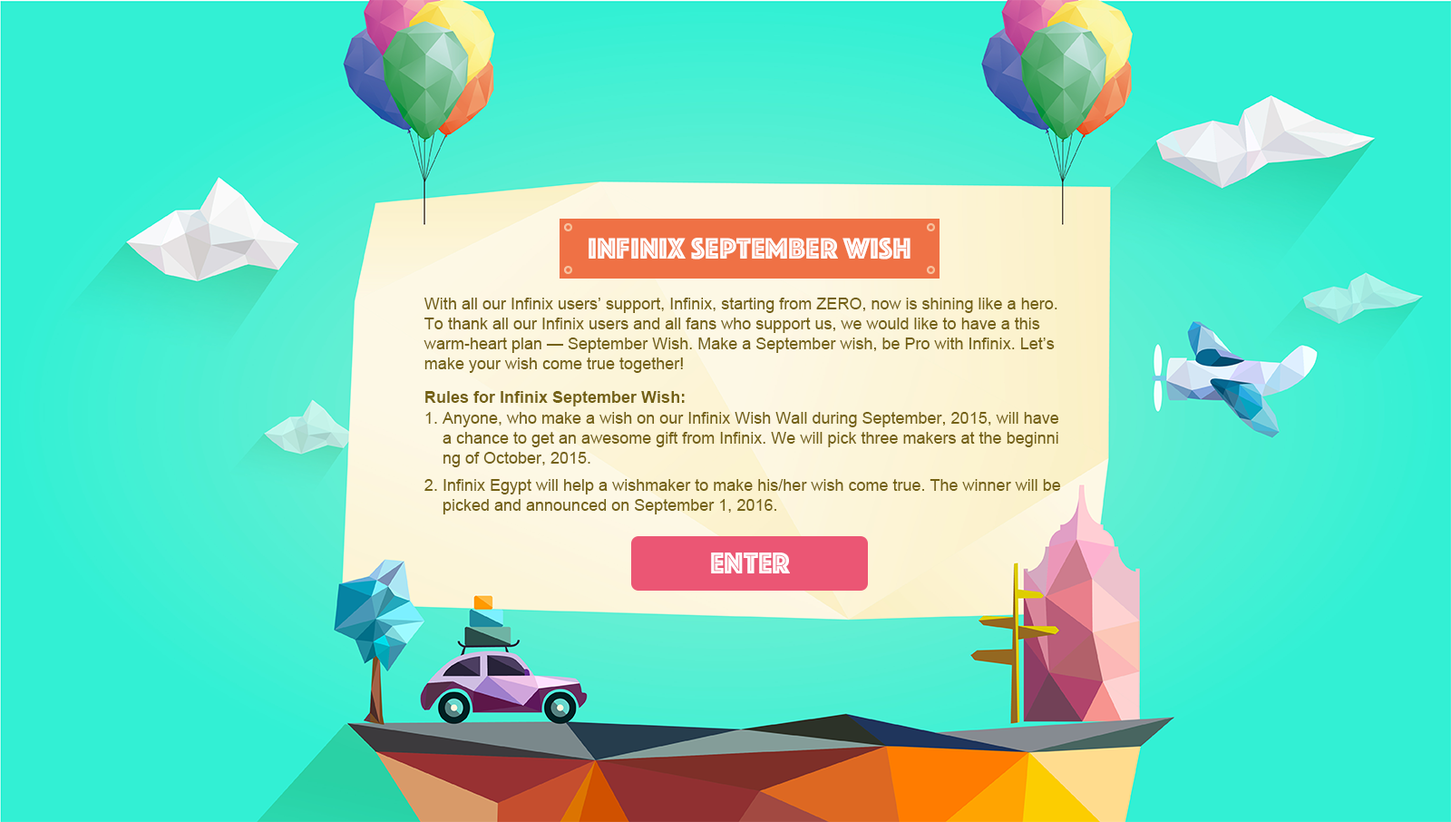
<style>
.page{position:relative;width:1451px;height:822px}
.page>*{position:absolute;margin:0}
.t1{font:30.5px "Phosphate-Inline";color:#ffffff}
.t2{font:16.3px/20px "ArialMT";color:#746113}
.t3{font:16.3px "Arial-BoldMT";color:#746113}
.t4{font:31.2px "Phosphate-Inline";color:#ffffff}
</style>
<div class="page">
<p class="t1" style="left:589px;top:238px;width:322px;height:21px">Infinix September Wish</p>
<p class="t2" style="left:424px;top:297px;width:634px;height:76px">With all our Infinix users’ support, Infinix, starting from ZERO, now is shining like a hero.<br>To thank all our Infinix users and all fans who support us, we would like to have a this <br>warm-heart plan — September Wish. Make a September wish, be Pro with Infinix. Let’s <br>make your wish come true together!</p>
<p class="t3" style="left:425px;top:391px;width:260px;height:15px">Rules for Infinix September Wish:</p>
<p class="t2" style="left:425px;top:412px;width:634px;height:55px">1. Anyone, who make a wish on our Infinix Wish Wall during September, 2015, will have<br>    a chance to get an awesome gift from Infinix. We will pick three makers at the beginni<br>    ng of October, 2015.</p>
<p class="t2" style="left:424px;top:479px;width:637px;height:35px">2. Infinix Egypt will help a wishmaker to make his/her wish come true. The winner will be <br>    picked and announced on September 1, 2016.</p>
<p class="t4" style="left:711px;top:552px;width:79px;height:21px">ENTER</p>
</div>
